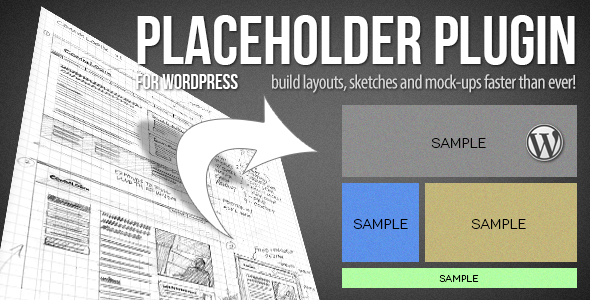
<style>
.page{position:relative;width:590px;height:300px}
.page>*{position:absolute;margin:0}
.t1{font:68.2px "BebasNeue";color:#ffffff}
.t2{font:20.8px "BebasNeue";color:#ffffff}
.t3{font:20.1px "MyriadPro-Cond";letter-spacing:-0.025em;color:#cccccc}
.t4{font:14px "Novecentowide-Book";color:#000000}
.t5{font:10px "Novecentowide-Book";color:#000000}
</style>
<div class="page">
<p class="t1" style="left:136px;top:15px;width:439px;height:74px">PLACEHOLDER PLUGIN<br><span class="t2">FOR WORDPRESS</span></p>
<p class="t3" style="left:272px;top:74px;width:304px;height:19px">build layouts, sketches and mock-ups faster than ever!</p>
<p class="t4" style="left:431px;top:138px;width:55px;height:10px">SAMPLE</p>
<p class="t4" style="left:353px;top:219px;width:55px;height:10px">SAMPLE</p>
<p class="t4" style="left:471px;top:219px;width:55px;height:10px">SAMPLE</p>
<p class="t5" style="left:439px;top:275px;width:40px;height:7px">SAMPLE</p>
</div>
